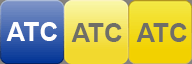
<style>
.page{position:relative;width:192px;height:64px}
.page>*{position:absolute;margin:0}
.t1{font:26px "Arial-BoldMT";color:#fefefe}
.t2{font:26px "Arial-BoldMT";color:#6f6e67}
</style>
<div class="page">
<p class="t1" style="left:6px;top:22px;width:51px;height:19px">ATC</p>
<p class="t2" style="left:71px;top:23px;width:51px;height:19px">ATC</p>
<p class="t2" style="left:136px;top:23px;width:51px;height:19px">ATC</p>
</div>
